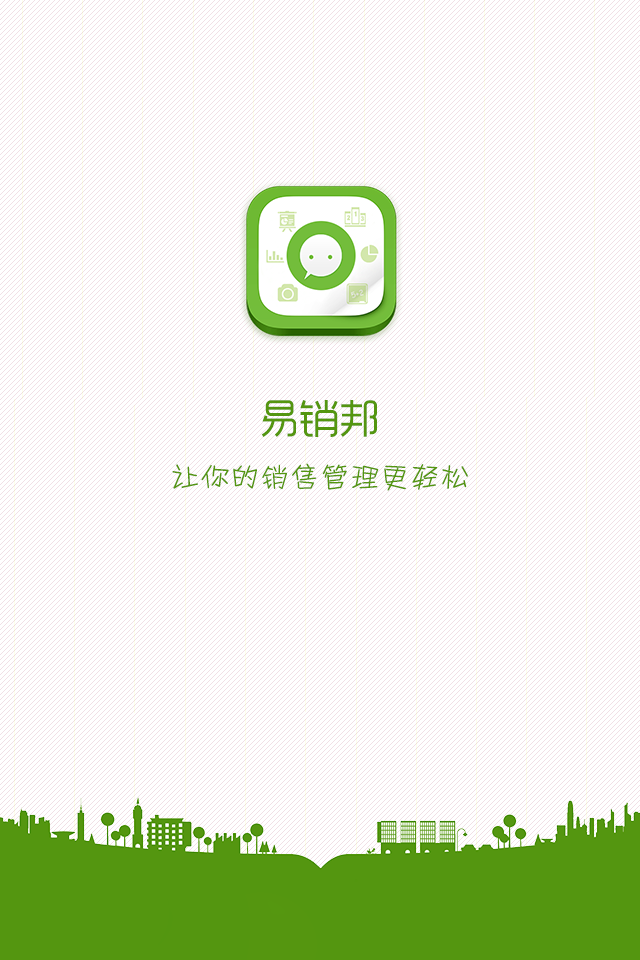
<style>
.page{position:relative;width:640px;height:960px;background:#ffffff}
.page>*{position:absolute;margin:0}
.t1{font:40px "RTWSYueGoTrial-Regular";color:#549610}
.t2{font:30px "HYg3gj";color:#549610}
</style>
<div class="page">
<p class="t1" style="left:261px;top:400px;width:116px;height:37px">易销邦</p>
<p class="t2" style="left:172px;top:463px;width:296px;height:28px">让你的销售管理更轻松</p>
</div>
